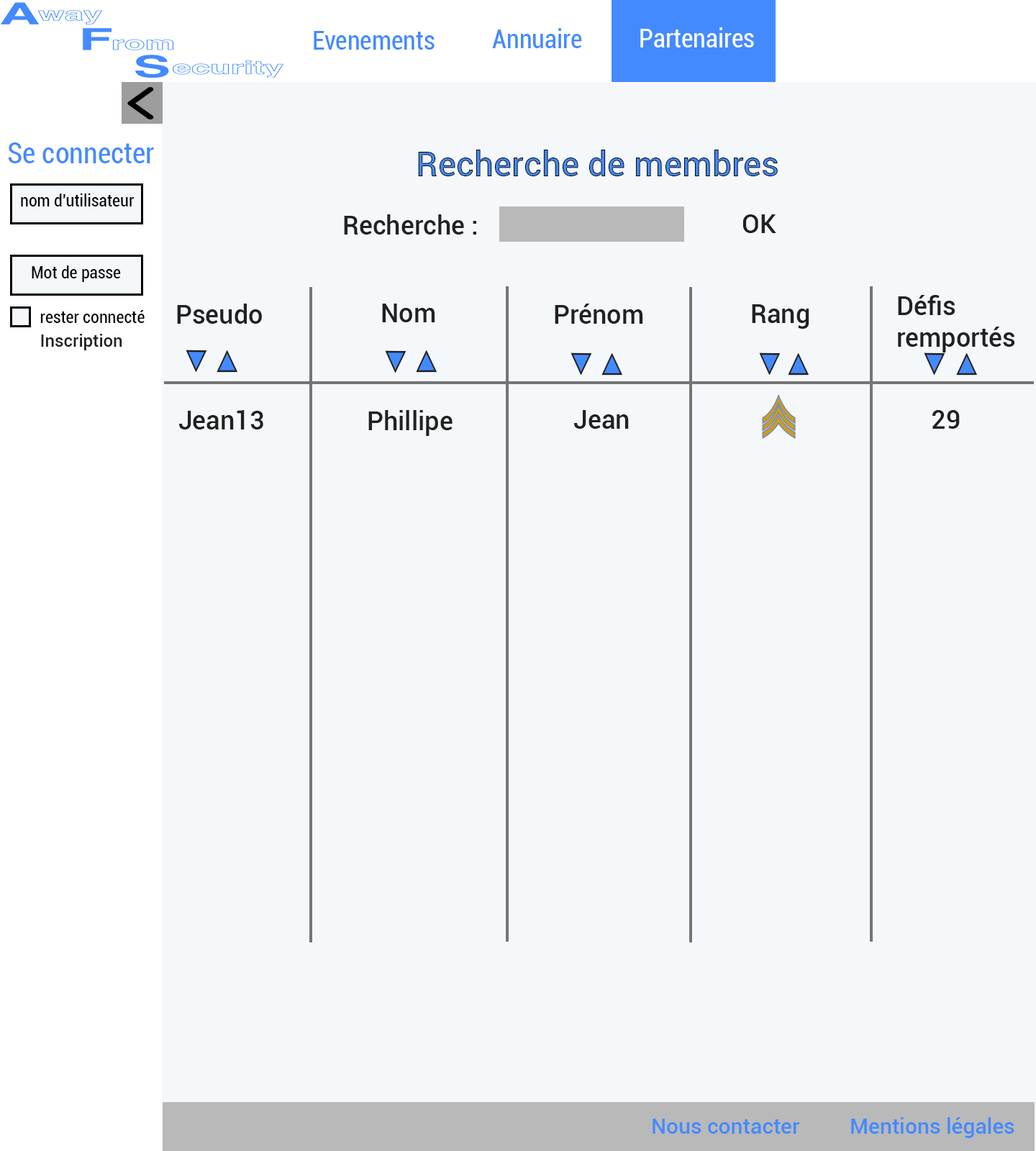
<style>
.page{position:relative;width:1036px;height:1151px;background:#f5f8fa}
.page>*{position:absolute;margin:0}
.t1{font:25.9px "Roboto-Condensed";color:#448aff}
.t2{font:25.9px "Roboto-Condensed";color:#ffffff}
.t3{font:28.8px "Roboto-Condensed";color:#448aff}
.t4{font:34.5px "Roboto-Medium"}
.t5{font:17.3px "Roboto-Condensed";color:#000000}
.t6{font:25.9px "Roboto-Medium";color:#212121}
.t7{font:17.3px "Roboto-Medium";color:#212121}
.t8{font:21.6px "Roboto-Medium";color:#448aff}
</style>
<div class="page">
<p class="t1" style="left:492px;top:28px;width:90px;height:20px">Annuaire</p>
<p class="t2" style="left:640px;top:27px;width:114px;height:20px">Partenaires</p>
<p class="t1" style="left:314px;top:31px;width:121px;height:19px">Evenements</p>
<p class="t3" style="left:8px;top:142px;width:146px;height:21px">Se connecter</p>
<p class="t4" style="left:418px;top:150px;width:360px;height:26px">Recherche de membres</p>
<p class="t5" style="left:21px;top:194px;width:113px;height:12px">nom d'utilisateur</p>
<p class="t6" style="left:344px;top:214px;width:132px;height:21px">Recherche :</p>
<p class="t6" style="left:742px;top:214px;width:34px;height:19px">OK</p>
<p class="t5" style="left:32px;top:265px;width:89px;height:17px">Mot de passe</p>
<p class="t6" style="left:177px;top:304px;width:85px;height:20px">Pseudo</p>
<p class="t6" style="left:382px;top:304px;width:53px;height:18px">Nom</p>
<p class="t6" style="left:555px;top:304px;width:88px;height:20px">Prénom</p>
<p class="t6" style="left:752px;top:304px;width:57px;height:25px">Rang</p>
<p class="t6" style="left:898px;top:295px;width:117px;height:58px">Défis <br>remportés</p>
<p class="t5" style="left:40px;top:310px;width:105px;height:13px">rester connecté</p>
<p class="t7" style="left:41px;top:334px;width:81px;height:16px">Inscription</p>
<p class="t6" style="left:179px;top:410px;width:84px;height:19px">Jean13</p>
<p class="t6" style="left:368px;top:410px;width:85px;height:26px">Phillipe</p>
<p class="t6" style="left:574px;top:410px;width:55px;height:19px">Jean</p>
<p class="t6" style="left:932px;top:410px;width:28px;height:19px">29</p>
<p class="t8" style="left:653px;top:1119px;width:147px;height:15px">Nous contacter</p>
<p class="t8" style="left:851px;top:1117px;width:163px;height:21px">Mentions légales</p>
</div>
